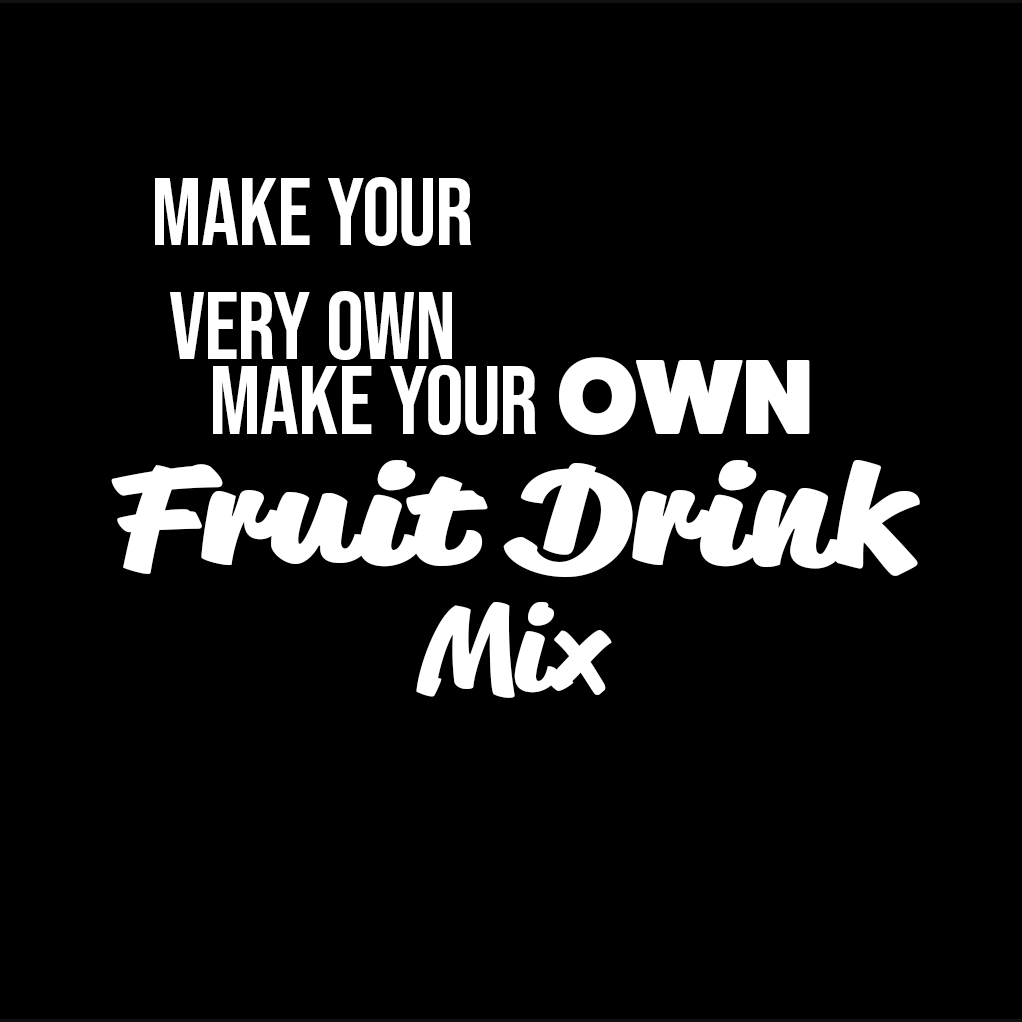
<style>
.page{position:relative;width:1022px;height:1022px;background:#000000}
.page>*{position:absolute;margin:0}
.t1{font:95px "BebasNeue-Regular";color:#ffffff}
.t2{font:133.8px/127px "ReklameScript-Black";color:#ffffff}
.t3{font:97.2px/127px "BebasNeue-Regular";color:#ffffff;text-transform:uppercase}
.t4{font:108px/127px "FatFrank-Heavy";color:#ffffff;text-transform:uppercase}
.t5{font:133.8px/127px "ReklameScript-Black";color:#ffffff;text-transform:uppercase}
.t6{font:113.1px/127px "ReklameScript-Bold";color:#ffffff}
</style>
<div class="page">
<p class="t1" style="left:155px;top:177px;width:316px;height:183px;text-align:center">MAKE YOUR<br>very own</p>
<p class="t2" style="left:111px;top:357px;width:809px;height:341px;text-align:center"><span class="t3">make your </span><span class="t4">OWN<br></span><span class="t5">F</span>ruit Drink<br><span class="t6">Mix</span></p>
</div>
